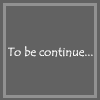
<style>
.page{position:relative;width:100px;height:100px;background:#626262}
.page>*{position:absolute;margin:0}
.t1{font:12px "TempusSansITC";color:#ffffff}
</style>
<div class="page">
<p class="t1" style="left:8px;top:46px;width:85px;height:11px">To be continue...</p>
</div>
